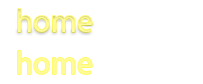
<style>
.page{position:relative;width:203px;height:84px;background:#ffffff}
.page>*{position:absolute;margin:0}
.t1{font:31.5px "MyriadPro-Regular";color:#fffb98}
</style>
<div class="page">
<p class="t1" style="left:18px;top:9px;width:74px;height:23px">home</p>
</div>
